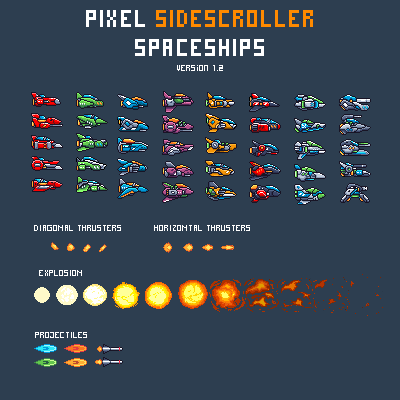
<style>
.page{position:relative;width:400px;height:400px;background:#2d3e50}
.page>*{position:absolute;margin:0}
.t1{font:24px "Pixel";color:#ff8a00}
.t2{font:24px "Pixel";color:#ffffff}
.t3{font:9px "Pixel";color:#ffffff}
</style>
<div class="page">
<p class="t1" style="left:86px;top:10px;width:227px;height:46px;text-align:center"><span class="t2">PIXEL </span>SIDESCROLLER<br><span class="t2">SPACESHIPS</span></p>
<p class="t3" style="left:177px;top:65px;width:46px;height:6px">version 1.2</p>
<p class="t3" style="left:34px;top:225px;width:87px;height:6px">DIAGONAL THRUSTERS</p>
<p class="t3" style="left:154px;top:225px;width:96px;height:6px">HORIZONTAL THRUSTERS</p>
<p class="t3" style="left:39px;top:270px;width:43px;height:6px">EXPLOSION</p>
<p class="t3" style="left:35px;top:332px;width:52px;height:6px">PROJECTILES</p>
</div>
